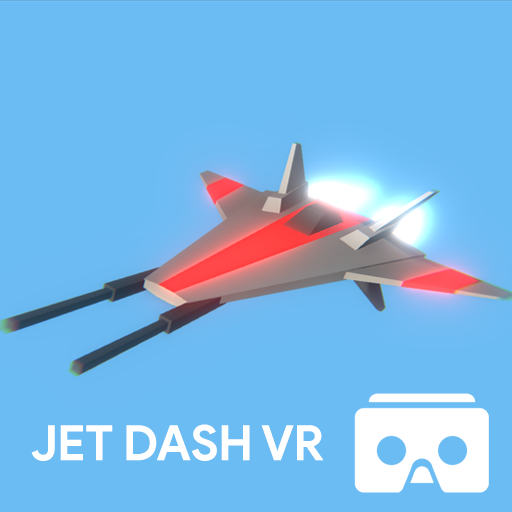
<style>
.page{position:relative;width:512px;height:512px;background:#6cbcf4}
.page>*{position:absolute;margin:0}
.t1{font:48.8px "ProductSans-Bold";letter-spacing:-0.01em;color:#ffffff;text-transform:uppercase}
</style>
<div class="page">
<p class="t1" style="left:31px;top:424px;width:293px;height:37px">JET DASH VR</p>
</div>
